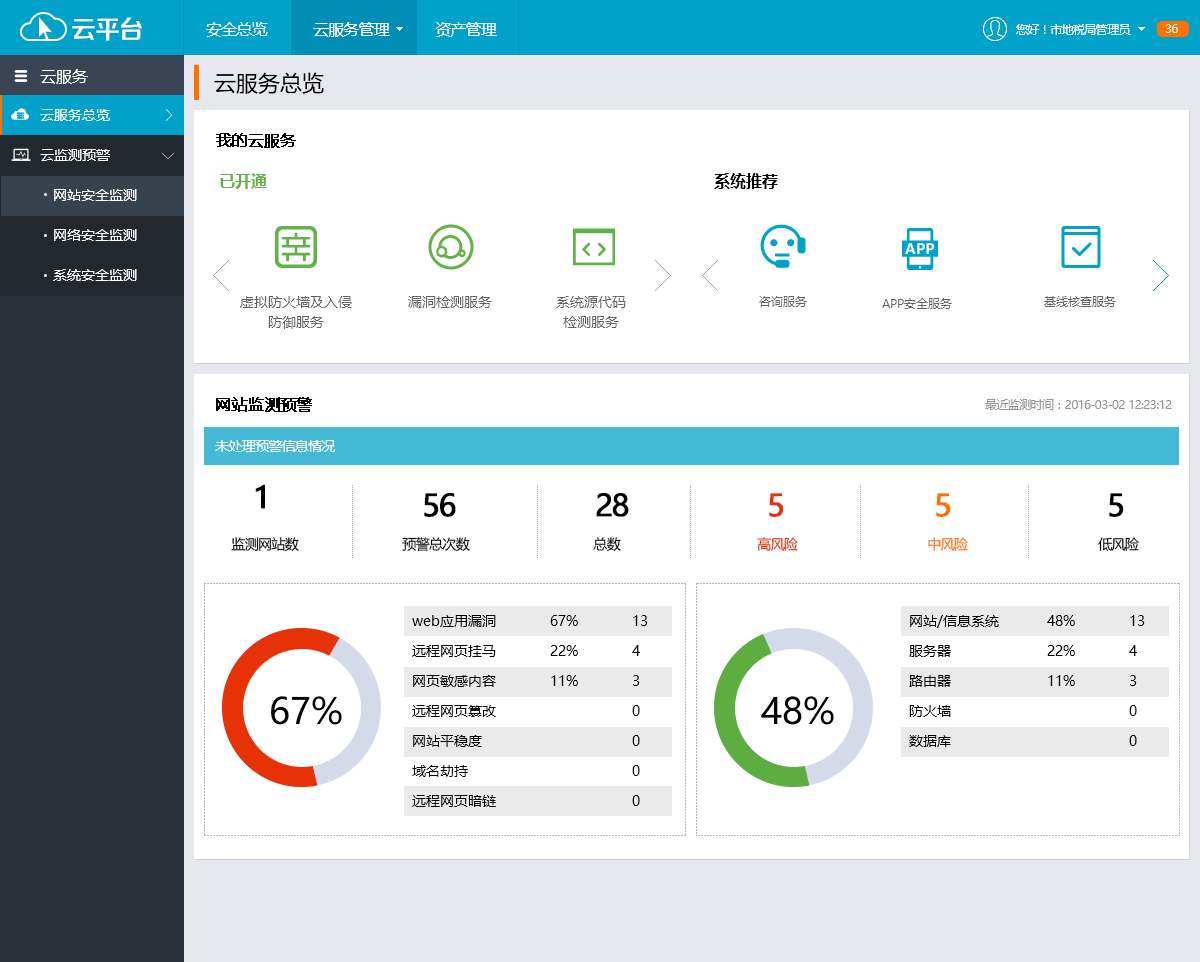
<style>
.page{position:relative;width:1200px;height:962px;background:#ffffff}
.page>*{position:absolute;margin:0}
.t1{font:25.4px "FZZZHONGJW--GB1-0";letter-spacing:-0.05em;color:#ffffff}
.t2{font:16px "MicrosoftYaHei";letter-spacing:-0.05em;color:#ffffff}
.t3{font:12px "MicrosoftYaHei";letter-spacing:-0.05em;color:#ffffff}
.t4{font:16px "MicrosoftYaHei";color:#ffffff}
.t5{font:22px "MicrosoftYaHei";color:#000000}
.t6{font:14px "MicrosoftYaHei";color:#ffffff}
.t7{font:16px "MicrosoftYaHei";letter-spacing:-0.05em;color:#000000;font-weight:bold}
.t8{font:16px "MicrosoftYaHei-Bold";color:#63b247}
.t9{font:16px "MicrosoftYaHei-Bold";color:#000000}
.t10{font:14px/40px "MicrosoftYaHei";color:#ffffff}
.t11{font:14px/20px "MicrosoftYaHei";color:#636363}
.t12{font:14px "MicrosoftYaHei";color:#636363}
.t13{font:12px "MicrosoftYaHei";color:#636363}
.t14{font:12px "MicrosoftYaHei";letter-spacing:-0.05em;color:#949494}
.t15{font:14px "MicrosoftYaHei";letter-spacing:-0.05em;color:#ffffff}
.t16{font:30px "MicrosoftYaHei";letter-spacing:-0.05em;color:#000000;font-weight:bold}
.t17{font:30px "MicrosoftYaHei";letter-spacing:-0.05em;color:#e73107;font-weight:bold}
.t18{font:30px "MicrosoftYaHei";letter-spacing:-0.05em;color:#ff7200;font-weight:bold}
.t19{font:14px "MicrosoftYaHei";letter-spacing:-0.05em;color:#000000}
.t20{font:14px "MicrosoftYaHei";letter-spacing:-0.05em;color:#e73107}
.t21{font:14px "MicrosoftYaHei";letter-spacing:-0.05em;color:#ff7200}
.t22{font:14px/30px "MicrosoftYaHei";color:#000000}
.t23{font:36px "MicrosoftYaHei";color:#000000}
</style>
<div class="page">
<p class="t1" style="left:72px;top:17px;width:70px;height:24px">云平台</p>
<p class="t2" style="left:206px;top:22px;width:291px;height:15px">安全总览           云服务管理           资产管理</p>
<p class="t3" style="left:1016px;top:24px;width:115px;height:11px">您好！市地税局管理员</p>
<p class="t3" style="left:1165px;top:24px;width:13px;height:9px">36</p>
<p class="t4" style="left:40px;top:69px;width:48px;height:15px">云服务</p>
<p class="t5" style="left:214px;top:72px;width:110px;height:22px">云服务总览</p>
<p class="t6" style="left:40px;top:109px;width:70px;height:12px">云服务总览</p>
<p class="t7" style="left:216px;top:133px;width:80px;height:15px">我的云服务</p>
<p class="t6" style="left:40px;top:149px;width:70px;height:12px">云监测预警</p>
<p class="t8" style="left:220px;top:173px;width:47px;height:16px">已开通</p>
<p class="t9" style="left:714px;top:173px;width:64px;height:16px">系统推荐</p>
<p class="t10" style="left:53px;top:189px;width:84px;height:92px">网站安全监测<br>网络安全监测<br>系统安全监测</p>
<p class="t11" style="left:240px;top:296px;width:112px;height:33px;text-align:center">虚拟防火墙及入侵<br>防御服务</p>
<p class="t12" style="left:408px;top:296px;width:84px;height:12px">漏洞检测服务</p>
<p class="t11" style="left:556px;top:296px;width:70px;height:32px;text-align:center">系统源代码<br>检测服务</p>
<p class="t13" style="left:759px;top:296px;width:48px;height:11px">咨询服务</p>
<p class="t13" style="left:882px;top:298px;width:70px;height:11px">APP安全服务</p>
<p class="t13" style="left:1044px;top:296px;width:72px;height:11px">基线核查服务</p>
<p class="t7" style="left:216px;top:397px;width:96px;height:15px">网站监测预警</p>
<p class="t14" style="left:985px;top:399px;width:187px;height:11px">最近监测时间：2016-03-02 12:23:12</p>
<p class="t15" style="left:215px;top:440px;width:120px;height:12px">未处理预警信息情况</p>
<p class="t16" style="left:255px;top:484px;width:10px;height:25px">1</p>
<p class="t16" style="left:424px;top:493px;width:32px;height:24px">56</p>
<p class="t16" style="left:596px;top:493px;width:33px;height:24px">28</p>
<p class="t17" style="left:769px;top:493px;width:15px;height:24px">5</p>
<p class="t18" style="left:936px;top:493px;width:15px;height:24px">5</p>
<p class="t16" style="left:1109px;top:493px;width:15px;height:24px">5</p>
<p class="t19" style="left:231px;top:537px;width:68px;height:15px">监测网站数</p>
<p class="t19" style="left:402px;top:537px;width:68px;height:15px">预警总次数</p>
<p class="t19" style="left:593px;top:537px;width:28px;height:15px">总数</p>
<p class="t20" style="left:757px;top:537px;width:41px;height:14px">高风险</p>
<p class="t21" style="left:928px;top:537px;width:40px;height:15px">中风险</p>
<p class="t19" style="left:1098px;top:537px;width:41px;height:14px">低风险</p>
<p class="t22" style="left:412px;top:615px;width:84px;height:192px">web应用漏洞<br>远程网页挂马<br>网页敏感内容<br>远程网页篡改<br>网站平稳度<br>域名劫持<br>远程网页暗链</p>
<p class="t22" style="left:550px;top:615px;width:28px;height:71px">67%<br>22%<br>11%</p>
<p class="t22" style="left:632px;top:615px;width:16px;height:191px">13<br>4<br>3<br>0<br>0<br>0<br>0</p>
<p class="t22" style="left:909px;top:615px;width:90px;height:132px">网站/信息系统<br>服务器<br>路由器<br>防火墙<br>数据库</p>
<p class="t22" style="left:1047px;top:615px;width:28px;height:71px">48%<br>22%<br>11%</p>
<p class="t22" style="left:1129px;top:615px;width:16px;height:131px">13<br>4<br>3<br>0<br>0</p>
<p class="t23" style="left:271px;top:696px;width:71px;height:29px">67%</p>
<p class="t23" style="left:761px;top:696px;width:73px;height:29px">48%</p>
</div>
